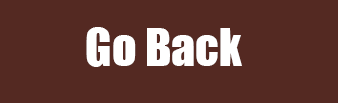
<style>
.page{position:relative;width:338px;height:103px;background:#542922}
.page>*{position:absolute;margin:0}
.t1{font:48px "Impact";color:#ffffff}
</style>
<div class="page">
<p class="t1" style="left:86px;top:27px;width:156px;height:40px">Go Back</p>
</div>
